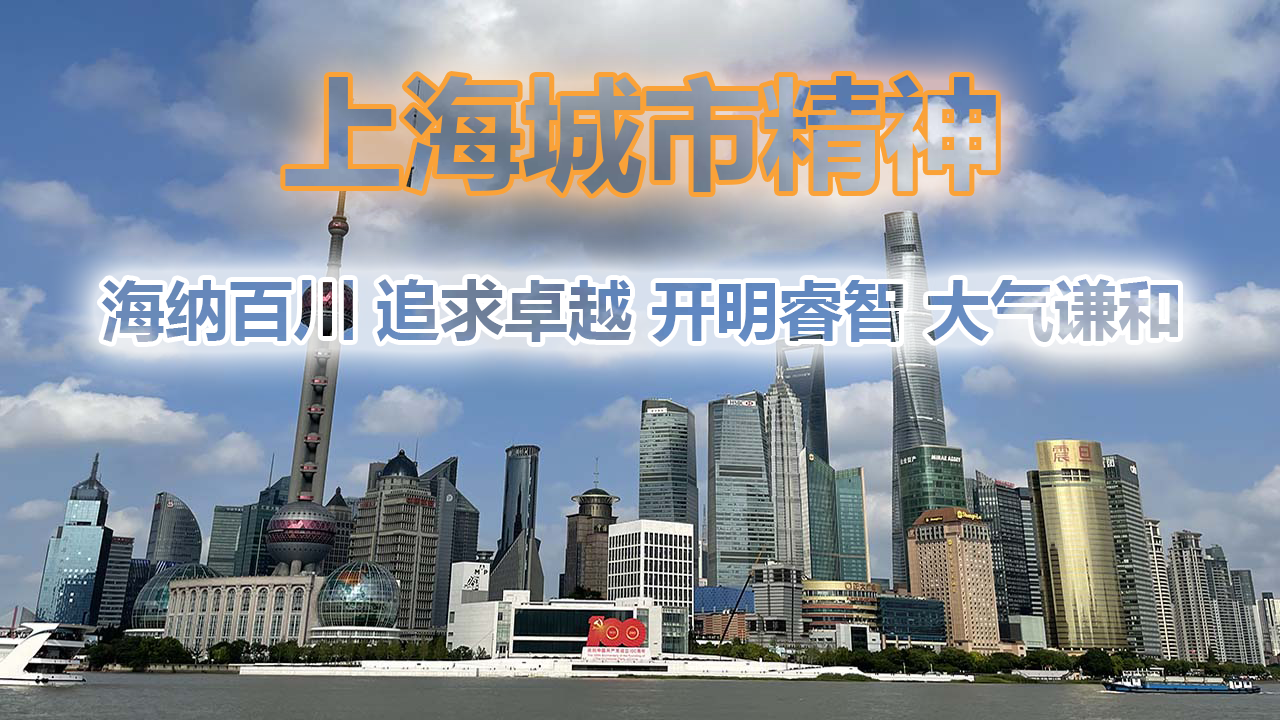
<style>
.page{position:relative;width:1280px;height:720px}
.page>*{position:absolute;margin:0}
.t1{font:64px "MicrosoftYaHei-Bold"}
</style>
<div class="page">
<p class="t1" style="left:101px;top:279px;width:1077px;height:63px">海纳百川 追求卓越 开明睿智 大气谦和</p>
</div>
